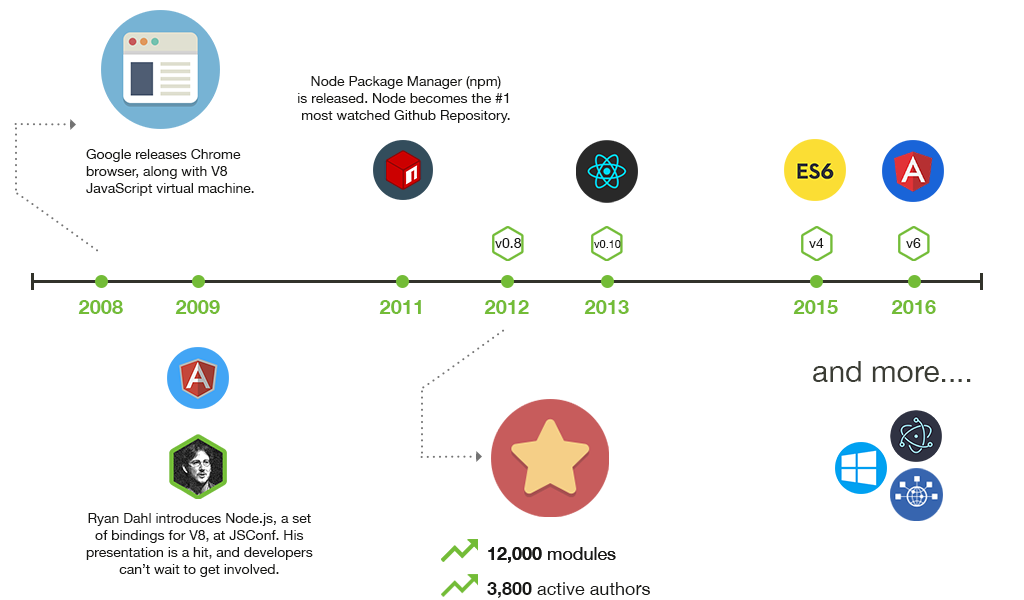
<style>
.page{position:relative;width:1024px;height:600px;background:#ffffff}
.page>*{position:absolute;margin:0}
.t1{font:14px "HelveticaNeue";color:#181816}
.t2{font:11px "HelveticaNeue";color:#181816}
.t3{font:20px "HelveticaNeue-Bold";color:#73bc37}
.t4{font:30px "HelveticaNeue";color:#3b3d35}
.t5{font:18px "HelveticaNeue";color:#181816}
.t6{font:18px "HelveticaNeue-Bold";color:#181816}
</style>
<div class="page">
<p class="t1" style="left:298px;top:76px;width:212px;height:47px;text-align:center">Node Package Manager (npm)<br>is released. Node becomes the #1 <br>most watched Github Repository.</p>
<p class="t1" style="left:86px;top:149px;width:168px;height:47px">Google releases Chrome<br>browser, along with V8<br>JavaScript virtual machine.</p>
<p class="t1" style="left:495px;top:238px;width:27px;height:10px">v0.8</p>
<p class="t2" style="left:594px;top:240px;width:27px;height:8px">v0.10</p>
<p class="t1" style="left:809px;top:238px;width:15px;height:10px">v4</p>
<p class="t1" style="left:906px;top:238px;width:15px;height:10px">v6</p>
<p class="t3" style="left:78px;top:300px;width:45px;height:14px">2008</p>
<p class="t3" style="left:175px;top:300px;width:45px;height:14px">2009</p>
<p class="t3" style="left:379px;top:300px;width:42px;height:14px">2011</p>
<p class="t3" style="left:484px;top:300px;width:45px;height:14px">2012</p>
<p class="t3" style="left:584px;top:300px;width:45px;height:14px">2013</p>
<p class="t3" style="left:793px;top:300px;width:45px;height:14px">2015</p>
<p class="t3" style="left:891px;top:300px;width:45px;height:14px">2016</p>
<p class="t4" style="left:813px;top:361px;width:158px;height:21px">and more....</p>
<p class="t1" style="left:86px;top:513px;width:227px;height:64px;text-align:center">Ryan Dahl introduces Node.js, a set<br>of bindings for V8, at JSConf. His<br>presentation is a hit, and developers<br>can’t wait to get involved.</p>
<p class="t5" style="left:488px;top:547px;width:128px;height:16px"><span class="t6">12,000 </span>modules</p>
<p class="t5" style="left:488px;top:547px;width:128px;height:16px"><span class="t6">12,000 </span>modules</p>
<p class="t5" style="left:487px;top:582px;width:163px;height:16px"><span class="t6">3,800 </span>active authors</p>
</div>
